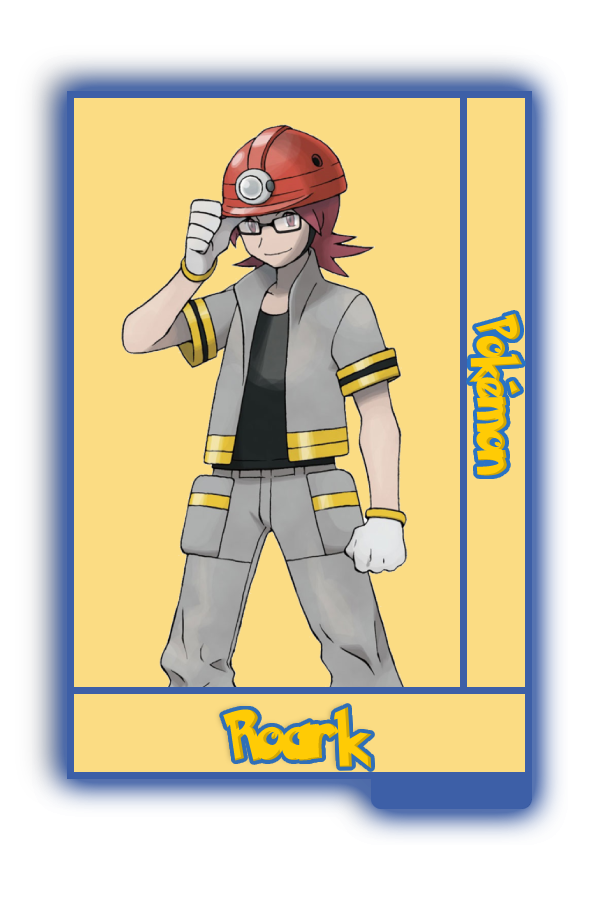
<style>
.page{position:relative;width:600px;height:900px;background:#fbdc83}
.page>*{position:absolute;margin:0}
.t1{font:48.8px "PokemonSolidNormal";color:#ffcb05;scale:0.8 1}
.t2{font:56.6px "PokemonSolidNormal";color:#ffcb05;scale:0.92 1}
</style>
<div class="page">
<p class="t1" style="left:469px;top:313px;width:54px;height:163px;rotate:90deg">Pokémon</p>
<p class="t2" style="left:223px;top:706px;width:149px;height:63px">Roark</p>
</div>
